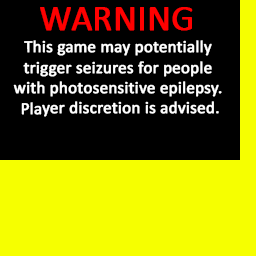
<style>
.page{position:relative;width:256px;height:256px;background:#000000}
.page>*{position:absolute;margin:0}
.t1{font:36.1px "Calibri";color:#ff0000;font-weight:bold}
.t2{font:17px "Calibri";color:#ffffff;font-weight:bold}
</style>
<div class="page">
<p class="t1" style="left:40px;top:7px;width:153px;height:24px">WARNING</p>
<p class="t2" style="left:13px;top:40px;width:209px;height:77px;text-align:center">This game may potentially <br>trigger seizures for people <br>with photosensitive epilepsy. <br>Player discretion is advised.</p>
</div>
